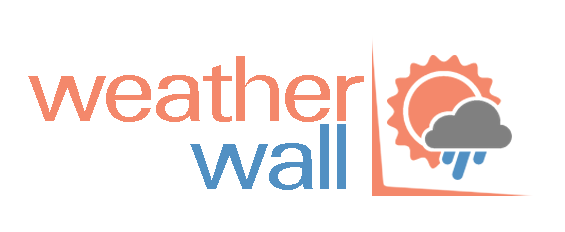
<style>
.page{position:relative;width:565px;height:232px;background:#ffffff}
.page>*{position:absolute;margin:0}
.t1{font:102.5px "Padauk-Regular";letter-spacing:-0.05em;color:#f4886b;scale:1.11 1}
.t2{font:102.5px "Padauk-Regular";letter-spacing:-0.05em;color:#5190c3;scale:1.11 1}
</style>
<div class="page">
<p class="t1" style="left:28px;top:56px;width:336px;height:66px">weather</p>
<p class="t2" style="left:190px;top:124px;width:156px;height:66px">wall</p>
</div>
